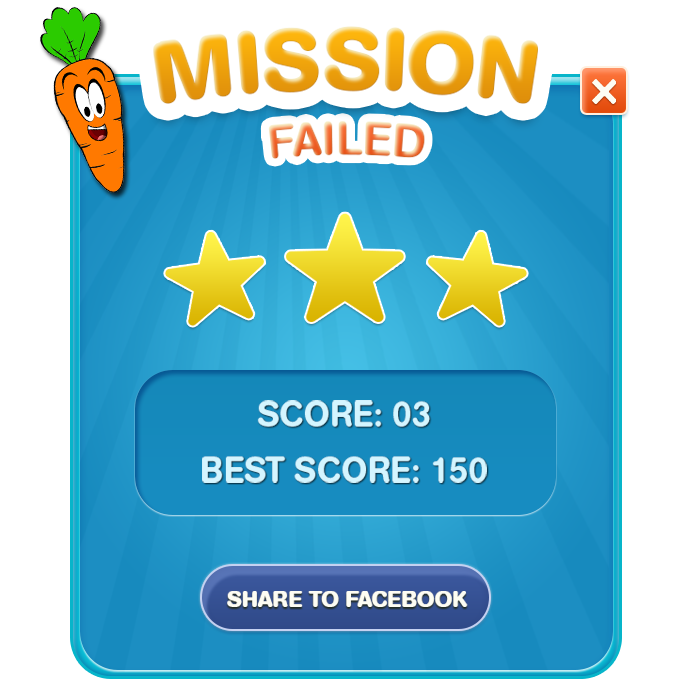
<style>
.page{position:relative;width:700px;height:700px;background:#ffffff}
.page>*{position:absolute;margin:0}
.t1{font:86.9px "AGBookRounded-Bold";color:#f8a900;text-transform:uppercase}
.t2{font:48.3px "AGBookRounded-Medium";text-transform:uppercase}
.t3{font:35.7px/13.5px "AGBookRounded-Medium";color:#d4f5ff;text-transform:uppercase;scale:0.96 1}
.t4{font:35.7px "AGBookRounded-Medium";color:#d4f5ff;text-transform:uppercase;scale:0.96 1}
.t5{font:23.2px "AGBookRounded-Bold";color:#fdfdf3;text-transform:uppercase}
</style>
<div class="page">
<p class="t1" style="left:153px;top:26px;width:385px;height:78px">mission</p>
<p class="t2" style="left:268px;top:121px;width:157px;height:38px">failed</p>
<p class="t3" style="left:202px;top:400px;width:285px;height:83px;text-align:center"><span class="t4">SCORE: 03<br><br></span>BEST SCORE: 150</p>
<p class="t5" style="left:227px;top:591px;width:241px;height:16px">SHARE TO FACEBOOK</p>
</div>
